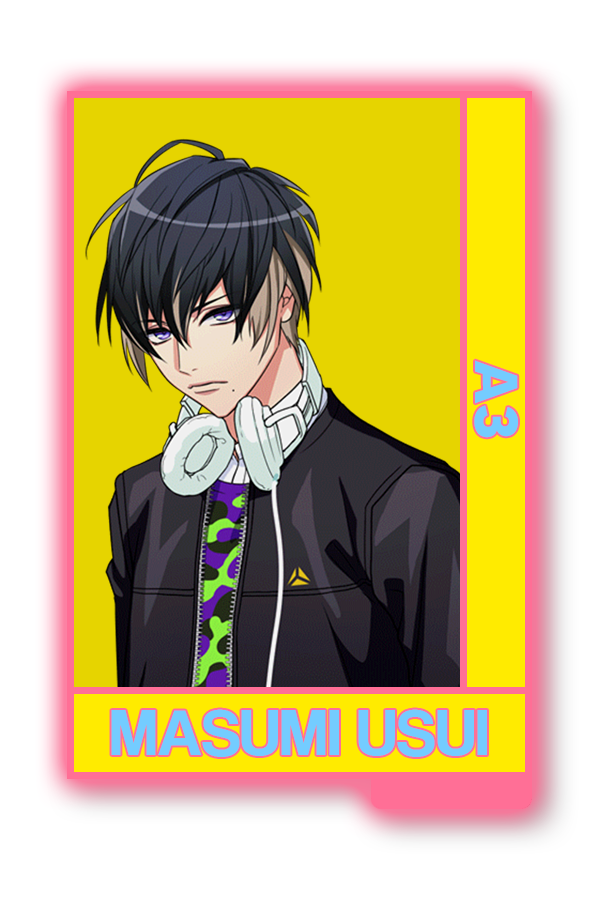
<style>
.page{position:relative;width:600px;height:900px;background:#ffffff}
.page>*{position:absolute;margin:0}
.t1{font:60.5px "MADETOMMY-Bold";color:#74ccff}
.t2{font:68.4px "CoolveticaRg-Regular";color:#74ccff}
</style>
<div class="page">
<p class="t1" style="left:474px;top:360px;width:44px;height:78px;rotate:90deg">A3</p>
<p class="t2" style="left:111px;top:709px;width:376px;height:48px">MASUMI USUI</p>
</div>
